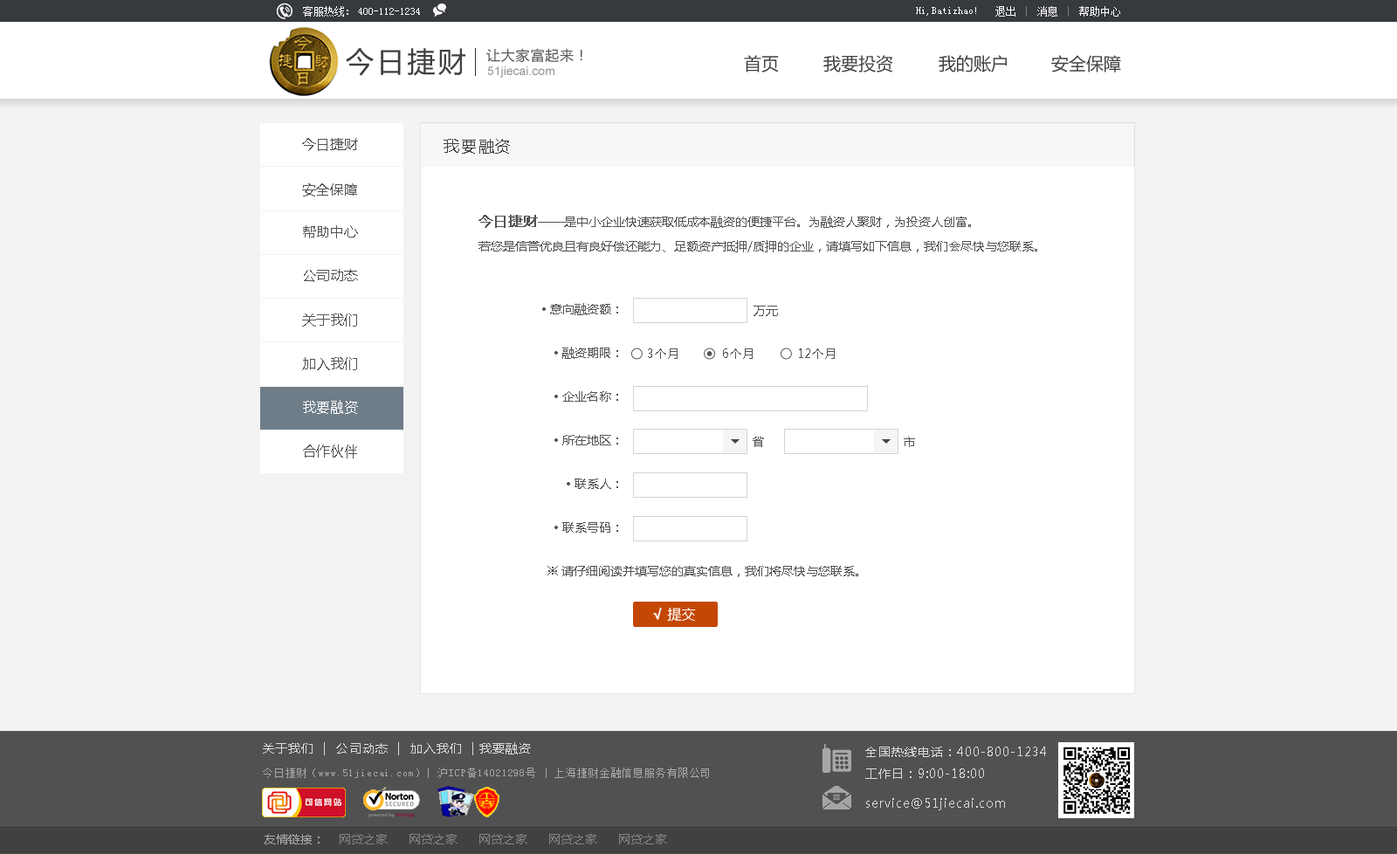
<style>
.page{position:relative;width:1397px;height:854px;background:#ffffff}
.page>*{position:absolute;margin:0}
.t1{font:10.5px "SimSun";color:#ffffff}
.t2{font:27.9px "MicrosoftYaHei";letter-spacing:0.1em;color:#3f3f3f}
.t3{font:14px "MicrosoftYaHei";letter-spacing:0.05em;color:#575757}
.t4{font:17.5px "MicrosoftYaHei";color:#414141}
.t5{font:12.2px "ArialMT";color:#969697}
.t6{font:14px "MicrosoftYaHei";color:#535353}
.t7{font:15.7px "MicrosoftYaHei";letter-spacing:0.1em;color:#3f3f3f}
.t8{font:12.2px/24.4px "MicrosoftYaHei";color:#545454}
.t9{font:14px/24.4px "MicrosoftYaHei";color:#545454;font-weight:bold}
.t10{font:12.2px/43.6px "MicrosoftYaHei";color:#545454}
.t11{font:12.2px "MicrosoftYaHei";color:#555555}
.t12{font:14px "MicrosoftYaHei";color:#545454}
.t13{font:12.2px "MicrosoftYaHei";letter-spacing:0.04em;color:#545454}
.t14{font:14px "MicrosoftYaHei";color:#ffffff}
.t15{font:12.2px "MicrosoftYaHei";color:#545454}
.t16{font:14px "MicrosoftYaHei";color:#ffffff;font-weight:bold}
.t17{font:12.2px "MicrosoftYaHei";letter-spacing:0.07em;color:#dbdbdb}
.t18{font:12.2px "MicrosoftYaHei";letter-spacing:0.07em;color:#dadada}
.t19{font:10.5px "SimSun";letter-spacing:0.07em;color:#a7a7a7}
.t20{font:12.2px "MicrosoftYaHei";color:#858484}
.t21{font:12.2px "MicrosoftYaHei";color:#a7a7a7}
</style>
<div class="page">
<p class="t1" style="left:303px;top:6px;width:45px;height:11px">客服热线：</p>
<p class="t1" style="left:358px;top:8px;width:62px;height:7px">400-112-1234</p>
<p class="t1" style="left:916px;top:7px;width:60px;height:9px">Hi,Batizhao!</p>
<p class="t1" style="left:995px;top:6px;width:125px;height:11px">退出    消息    帮助中心</p>
<p class="t2" style="left:346px;top:48px;width:119px;height:28px">今日捷财</p>
<p class="t3" style="left:486px;top:48px;width:96px;height:14px">让大家富起来！</p>
<p class="t4" style="left:744px;top:55px;width:35px;height:17px">首页</p>
<p class="t4" style="left:823px;top:55px;width:70px;height:17px">我要投资</p>
<p class="t4" style="left:938px;top:55px;width:69px;height:17px">我的账户</p>
<p class="t4" style="left:1051px;top:55px;width:70px;height:17px">安全保障</p>
<p class="t5" style="left:487px;top:66px;width:67px;height:12px">51jiecai.com</p>
<p class="t6" style="left:302px;top:138px;width:56px;height:13px">今日捷财</p>
<p class="t7" style="left:443px;top:139px;width:67px;height:15px">我要融资</p>
<p class="t6" style="left:302px;top:183px;width:55px;height:13px">安全保障</p>
<p class="t8" style="left:478px;top:215px;width:559px;height:37px;text-align:justify"><span class="t9">今日捷财</span>——是中小企业快速获取低成本融资的便捷平台。为融资人聚财，为投资人创富。<br>若您是信誉优良且有良好偿还能力、足额资产抵押/质押的企业，请填写如下信息，我们会尽快与您联系。</p>
<p class="t6" style="left:303px;top:225px;width:55px;height:13px">帮助中心</p>
<p class="t6" style="left:304px;top:269px;width:54px;height:13px">公司动态</p>
<p class="t10" style="left:542px;top:303px;width:76px;height:229px;text-align:right">• 意向融资额：<br>• 融资期限：<br>• 企业名称：<br>• 所在地区：<br>• 联系人： <br>• 联系号码：</p>
<p class="t11" style="left:753px;top:306px;width:25px;height:10px">万元</p>
<p class="t12" style="left:302px;top:313px;width:55px;height:13px">关于我们</p>
<p class="t13" style="left:648px;top:348px;width:29px;height:11px">3个月</p>
<p class="t13" style="left:723px;top:348px;width:29px;height:11px">6个月</p>
<p class="t13" style="left:799px;top:348px;width:36px;height:11px">12个月</p>
<p class="t6" style="left:302px;top:357px;width:55px;height:13px">加入我们</p>
<p class="t14" style="left:303px;top:400px;width:55px;height:14px">我要融资</p>
<p class="t11" style="left:752px;top:436px;width:12px;height:11px">省</p>
<p class="t11" style="left:903px;top:436px;width:12px;height:11px">市</p>
<p class="t6" style="left:303px;top:444px;width:54px;height:14px">合作伙伴</p>
<p class="t15" style="left:547px;top:566px;width:311px;height:11px">※ 请仔细阅读并填写您的真实信息，我们将尽快与您联系。</p>
<p class="t14" style="left:653px;top:607px;width:43px;height:15px"><span class="t16">√ </span>提交</p>
<p class="t17" style="left:263px;top:742px;width:268px;height:13px">关于我们  |  公司动态  |  加入我们  | 我要融资</p>
<p class="t18" style="left:865px;top:746px;width:181px;height:33px">全国热线电话：400-800-1234<br>工作日：9:00-18:00</p>
<p class="t19" style="left:263px;top:767px;width:446px;height:11px">今日捷财（www.51jiecai.com）| 沪ICP备14021298号 | 上海捷财金融信息服务有限公司</p>
<p class="t18" style="left:866px;top:798px;width:139px;height:12px">service@51jiecai.com</p>
<p class="t20" style="left:264px;top:834px;width:403px;height:10px"><span class="t21">友情链接：</span>    网贷之家      网贷之家      网贷之家      网贷之家      网贷之家</p>
</div>
